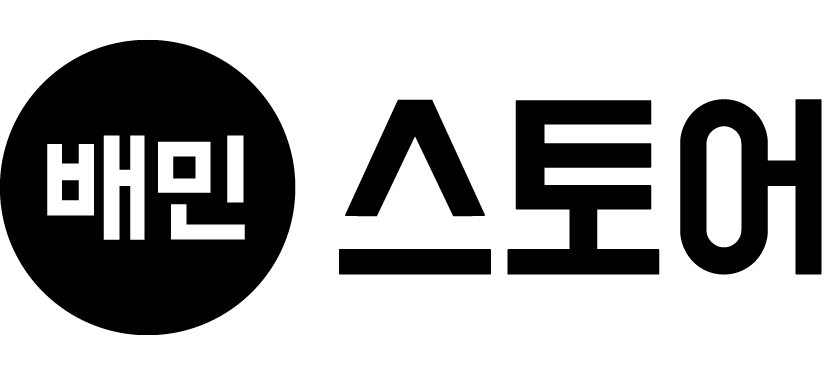
<style>
.page{position:relative;width:834px;height:375px;background:#ffffff}
.page>*{position:absolute;margin:0}
.t1{font:183.8px "BMDoHyeon";letter-spacing:-0.025em;color:#000000;font-weight:bold;scale:0.95 1}
</style>
<div class="page">
<p class="t1" style="left:339px;top:99px;width:483px;height:176px">스토어</p>
</div>
